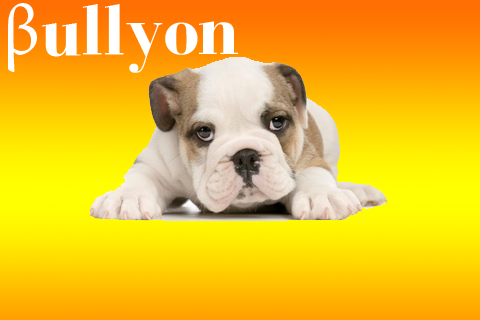
<style>
.page{position:relative;width:480px;height:320px}
.page>*{position:absolute;margin:0}
.t1{font:72px "BodoniFLF-Bold";color:#ffffff}
.t2{font:72px "MinionPro-Regular";color:#ffffff}
</style>
<div class="page">
<p class="t1" style="left:8px;top:3px;width:230px;height:70px"><span class="t2">β</span>ullyon</p>
</div>
